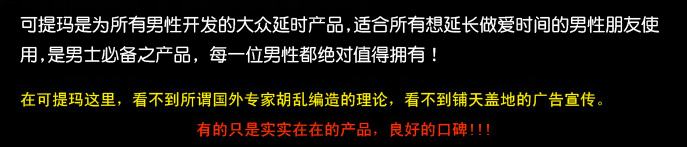
<style>
.page{position:relative;width:687px;height:147px;background:#000000}
.page>*{position:absolute;margin:0}
.t1{font:18px/30px "DFYuanW7";color:#ffffff}
</style>
<div class="page">
<p class="t1" style="left:20px;top:15px;width:639px;height:48px">可提玛是为所有男性开发的大众延时产品,适合所有想延长做爱时间的男性朋友使用,是男士必备之产品，每一位男性都绝对值得拥有！</p>
</div>
